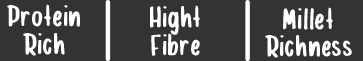
<style>
.page{position:relative;width:363px;height:61px;background:#333333}
.page>*{position:absolute;margin:0}
.t1{font:40.3px "Fishermills";color:#ffffff}
</style>
<div class="page">
<p class="t1" style="left:7px;top:4px;width:73px;height:23px">Protein</p>
<p class="t1" style="left:150px;top:5px;width:50px;height:30px">Hight</p>
<p class="t1" style="left:283px;top:7px;width:50px;height:23px">Millet</p>
<p class="t1" style="left:23px;top:33px;width:42px;height:23px">Rich</p>
<p class="t1" style="left:151px;top:33px;width:49px;height:23px">Fibre</p>
<p class="t1" style="left:265px;top:35px;width:87px;height:23px">Richness</p>
</div>
